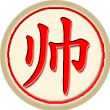
<style>
.page{position:relative;width:110px;height:110px}
.page>*{position:absolute;margin:0}
.t1{font:83.8px "AdobeKaitiStd-Regular";color:#ff0000}
</style>
<div class="page">
<p class="t1" style="left:24px;top:18px;width:65px;height:76px">帅</p>
</div>
